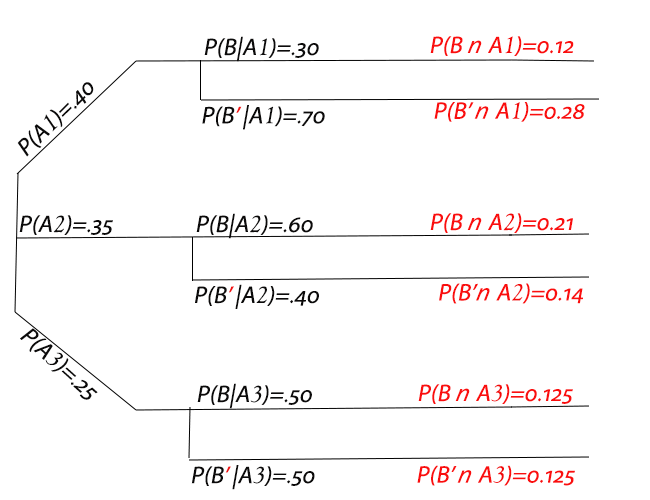
<style>
.page{position:relative;width:650px;height:500px;background:#ffffff}
.page>*{position:absolute;margin:0}
.t1{font:24px "MyriadPro-Regular";letter-spacing:0.005em;color:#0b0a0a;font-style:italic}
.t2{font:24px "GoudyOldStyleT-Regular";letter-spacing:0.005em;color:#0b0a0a;font-style:italic}
.t3{font:24px "MyriadPro-Regular";letter-spacing:0.005em;color:#fa0e0e;font-style:italic}
.t4{font:24px "SegoeUI-Italic";letter-spacing:0.005em;color:#fa0e0e;font-style:italic}
.t5{font:24px "GoudyOldStyleT-Regular";letter-spacing:0.005em;color:#f20808;font-style:italic}
.t6{font:24px "MyriadPro-Regular";letter-spacing:0.005em;color:#f11313;font-style:italic}
</style>
<div class="page">
<p class="t1" style="left:204px;top:36px;width:115px;height:26px">P(B|A<span class="t2">1</span>)=.30</p>
<p class="t3" style="left:430px;top:36px;width:144px;height:20px">P(B <span class="t4">n </span>A<span class="t5">1</span>)=0.12</p>
<p class="t1" style="left:17px;top:82px;width:77px;height:75px;rotate:-44deg">P(A<span class="t2">1</span>)=.40</p>
<p class="t3" style="left:434px;top:102px;width:151px;height:20px">P(B’ <span class="t4">n </span>A<span class="t5">1</span>)=0.28</p>
<p class="t1" style="left:202px;top:105px;width:123px;height:25px">P(B<span class="t6">’ </span>|A<span class="t2">1</span>)=.70</p>
<p class="t1" style="left:19px;top:215px;width:94px;height:20px">P(A<span class="t2">2</span>)=.35</p>
<p class="t1" style="left:196px;top:213px;width:117px;height:26px">P(B|A<span class="t2">2</span>)=.60</p>
<p class="t3" style="left:430px;top:213px;width:143px;height:20px">P(B <span class="t4">n </span>A<span class="t5">2</span>)=0.21</p>
<p class="t1" style="left:195px;top:284px;width:124px;height:25px">P(B<span class="t6">’ </span>|A<span class="t2">2</span>)=.40</p>
<p class="t3" style="left:439px;top:283px;width:144px;height:21px">P(B’<span class="t4">n </span>A<span class="t5">2</span>)=0.14</p>
<p class="t1" style="left:20px;top:328px;width:78px;height:72px;rotate:42deg">P(A<span class="t2">3</span>)=.25</p>
<p class="t1" style="left:197px;top:383px;width:115px;height:26px">P(B|A<span class="t2">3</span>)=.50</p>
<p class="t3" style="left:418px;top:384px;width:155px;height:20px">P(B <span class="t4">n </span>A<span class="t5">3</span>)=0.125</p>
<p class="t1" style="left:191px;top:465px;width:124px;height:25px">P(B<span class="t6">’ </span>|A<span class="t2">3</span>)=.50</p>
<p class="t3" style="left:417px;top:465px;width:158px;height:21px">P(B’ <span class="t4">n </span>A<span class="t5">3</span>)=0.125</p>
</div>
